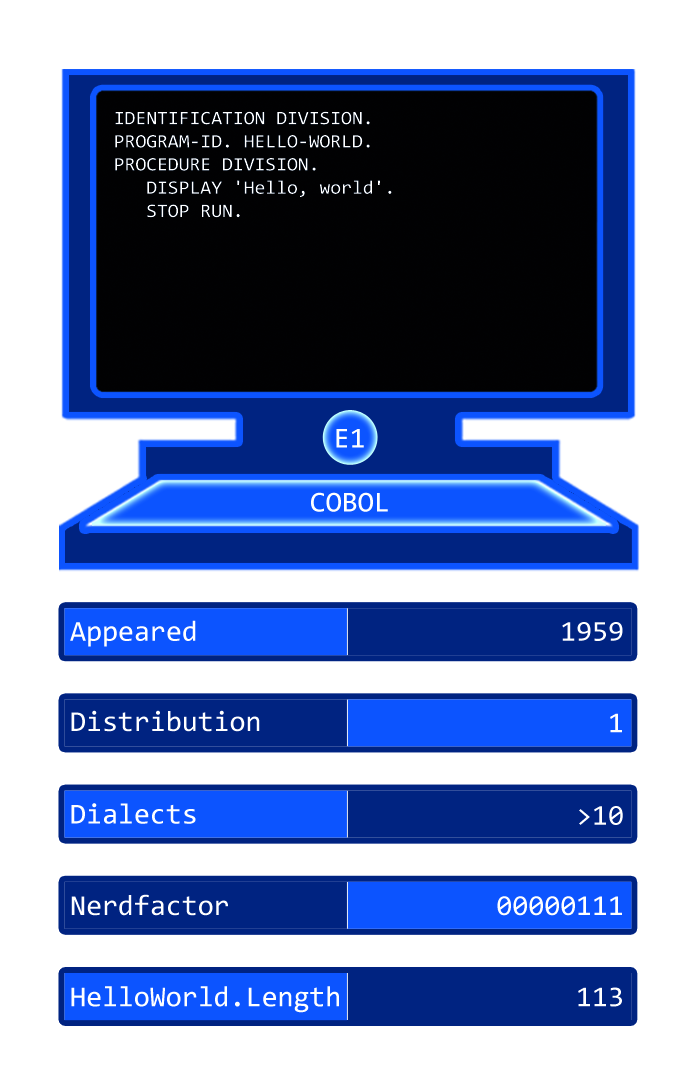
<style>
.page{position:relative;width:697px;height:1087px;background:#ffffff}
.page>*{position:absolute;margin:0}
.t1{font:19.3px "Consolas";color:#ffffff}
.t2{font:29px "Consolas";color:#ffffff}
</style>
<div class="page">
<p class="t1" style="left:115px;top:111px;width:277px;height:107px">IDENTIFICATION DIVISION.<br>PROGRAM-ID. HELLO-WORLD.<br>PROCEDURE DIVISION.<br>   DISPLAY 'Hello, world'.<br>   STOP RUN.</p>
<p class="t2" style="left:336px;top:429px;width:28px;height:19px">E1</p>
<p class="t2" style="left:311px;top:492px;width:77px;height:20px">COBOL</p>
<p class="t2" style="left:70px;top:620px;width:126px;height:27px">Appeared</p>
<p class="t2" style="left:562px;top:622px;width:61px;height:19px">1959</p>
<p class="t2" style="left:71px;top:710px;width:189px;height:22px">Distribution</p>
<p class="t2" style="left:610px;top:713px;width:12px;height:20px">1</p>
<p class="t2" style="left:71px;top:803px;width:125px;height:21px">Dialects</p>
<p class="t2" style="left:579px;top:806px;width:44px;height:19px">&gt;10</p>
<p class="t2" style="left:71px;top:894px;width:157px;height:22px">Nerdfactor</p>
<p class="t2" style="left:497px;top:896px;width:125px;height:20px">00000111</p>
<p class="t2" style="left:71px;top:986px;width:268px;height:27px">HelloWorld.Length</p>
<p class="t2" style="left:578px;top:987px;width:44px;height:20px">113</p>
</div>
